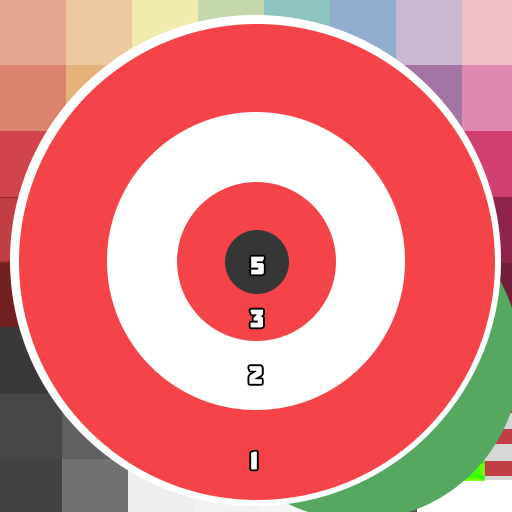
<style>
.page{position:relative;width:512px;height:512px;background:#f5434a}
.page>*{position:absolute;margin:0}
.t1{font:25px "Molot";letter-spacing:0.051em;color:#ffffff}
</style>
<div class="page">
<p class="t1" style="left:251px;top:256px;width:13px;height:19px">5</p>
<p class="t1" style="left:250px;top:309px;width:13px;height:19px">3</p>
<p class="t1" style="left:249px;top:366px;width:13px;height:18px">2</p>
<p class="t1" style="left:251px;top:451px;width:6px;height:19px">1</p>
</div>
